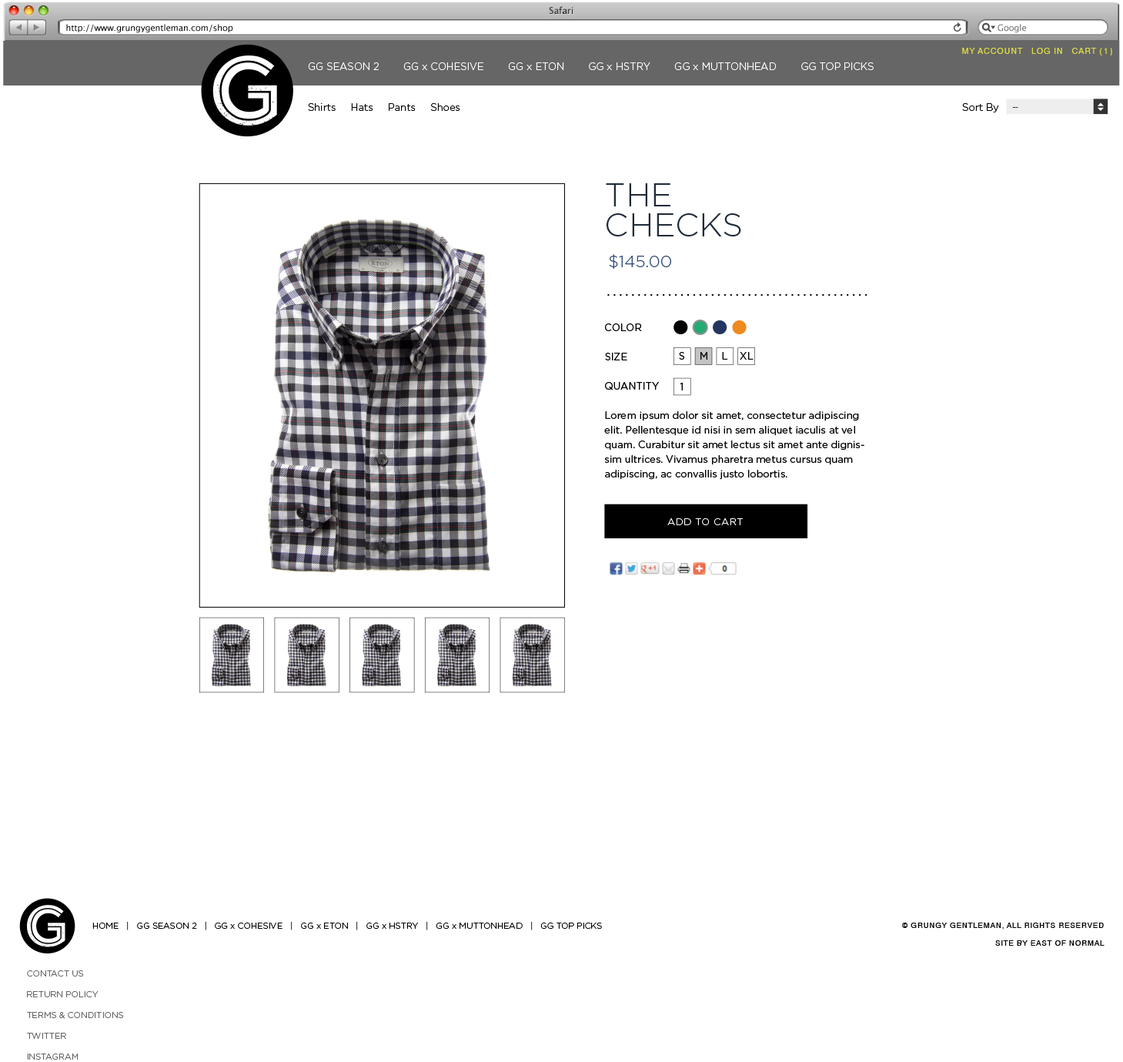
<style>
.page{position:relative;width:1123px;height:1062px;background:#ffffff}
.page>*{position:absolute;margin:0}
.t1{font:8.5px "LucidaGrande";color:#000000}
.t2{font:8.5px "LucidaGrande";color:#5e5e5f}
.t3{font:8.5px "Helvetica";letter-spacing:0.06em;color:#e1dc44;text-transform:uppercase}
.t4{font:10px "GothamHTF-Light";color:#ffffff}
.t5{font:10px "GothamHTF-Light";color:#000000}
.t6{font:7.7px "HelveticaNeue";letter-spacing:-0.02em;color:#333333}
.t7{font:32.6px/30px "GothamHTF-Light";color:#1e2938;text-transform:uppercase}
.t8{font:16.5px "GothamHTF-Light";color:#2d477a}
.t9{font:10px/14.6px "GothamHTF-Book";color:#000000}
.t10{font:10px "GothamHTF-Book";color:#000000}
.t11{font:9.9px "GothamHTF-Light";letter-spacing:0.04em;color:#ffffff;text-transform:uppercase}
.t12{font:8.5px "GothamHTF-Light";color:#000000}
.t13{font:7.7px "Helvetica";letter-spacing:0.06em;color:#000000;text-transform:uppercase}
.t14{font:8.5px/20.9px "GothamHTF-Light";color:#666666}
</style>
<div class="page">
<p class="t1" style="left:66px;top:24px;width:167px;height:9px">http://www.grungygentleman.com/shop</p>
<p class="t2" style="left:998px;top:24px;width:28px;height:9px">Google</p>
<p class="t3" style="left:962px;top:48px;width:150px;height:8px">My Account   LOG IN   Cart (1)</p>
<p class="t4" style="left:308px;top:62px;width:566px;height:8px">GG SEASON 2        GG x COHESIVE        GG x ETON        GG x HSTRY        GG x MUTTONHEAD        GG TOP PICKS</p>
<p class="t5" style="left:308px;top:103px;width:152px;height:8px">Shirts     Hats     Pants     Shoes</p>
<p class="t5" style="left:962px;top:103px;width:37px;height:9px">Sort By</p>
<p class="t6" style="left:1012px;top:107px;width:7px;height:1px">--</p>
<p class="t7" style="left:606px;top:183px;width:135px;height:53px">The<br>Checks</p>
<p class="t8" style="left:609px;top:254px;width:62px;height:15px">$145.00</p>
<p class="t9" style="left:604px;top:323px;width:261px;height:157px">COLOR<br><br>SIZE<br><br>QUANTITY<br><br>Lorem ipsum dolor sit amet, consectetur adipiscing elit. Pellentesque id nisi in sem aliquet iaculis at vel quam. Curabitur sit amet lectus sit amet ante dignissim ultrices. Vivamus pharetra metus cursus quam adipiscing, ac convallis justo lobortis.</p>
<p class="t10" style="left:679px;top:352px;width:5px;height:8px">S</p>
<p class="t10" style="left:701px;top:352px;width:6px;height:8px">M</p>
<p class="t10" style="left:722px;top:352px;width:6px;height:8px">L</p>
<p class="t10" style="left:740px;top:352px;width:14px;height:8px">XL</p>
<p class="t10" style="left:680px;top:383px;width:3px;height:7px">1</p>
<p class="t11" style="left:667px;top:518px;width:76px;height:7px">Add to Cart</p>
<p class="t12" style="left:92px;top:922px;width:510px;height:8px">HOME   |   GG SEASON 2   |   GG x COHESIVE   |   GG x ETON   |   GG x HSTRY   |   GG x MUTTONHEAD   |   GG TOP PICKS</p>
<p class="t13" style="left:902px;top:922px;width:202px;height:7px">© Grungy Gentleman, All Rights Reserved</p>
<p class="t13" style="left:995px;top:940px;width:110px;height:5px">Site by EAST of NORMAL</p>
<p class="t14" style="left:27px;top:970px;width:97px;height:89px">CONTACT US<br>RETURN POLICY<br>TERMS &amp; CONDITIONS<br>TWITTER<br>INSTAGRAM</p>
</div>
